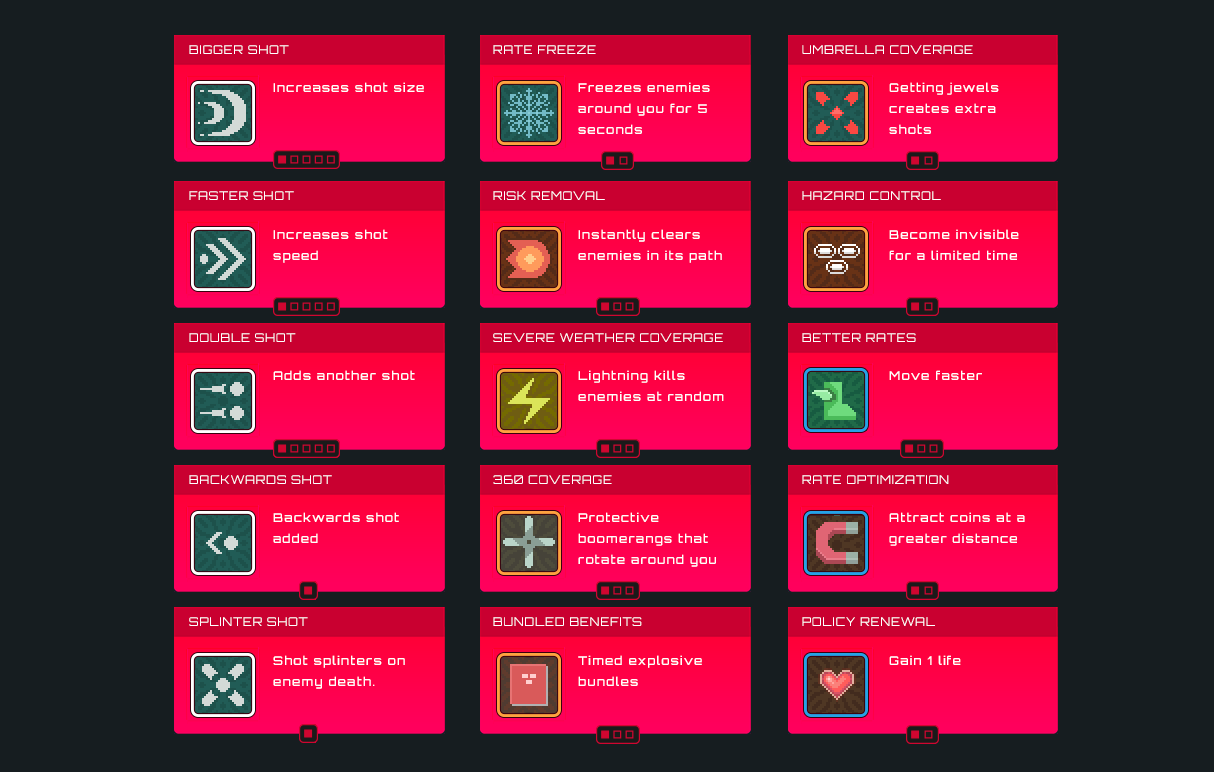
<style>
.page{position:relative;width:1214px;height:772px;background:#161d20}
.page>*{position:absolute;margin:0}
.t1{font:12px "Orbitron-Regular";letter-spacing:0.05em;color:#ffffff}
.t2{font:12px "Orbitron-Medium";letter-spacing:0.1em;color:#ffffff}
.t3{font:12px/21px "Orbitron-Medium";letter-spacing:0.1em;color:#ffffff}
</style>
<div class="page">
<p class="t1" style="left:189px;top:45px;width:100px;height:9px">BIGGER SHOT</p>
<p class="t1" style="left:493px;top:45px;width:103px;height:9px">RATE FREEZE</p>
<p class="t1" style="left:802px;top:45px;width:171px;height:9px">UMBRELLA COVERAGE</p>
<p class="t2" style="left:273px;top:82px;width:151px;height:10px">Increases shot size</p>
<p class="t3" style="left:578px;top:82px;width:132px;height:52px">Freezes enemies around you for 5 seconds</p>
<p class="t3" style="left:889px;top:82px;width:110px;height:52px">Getting jewels creates extra shots</p>
<p class="t1" style="left:189px;top:191px;width:105px;height:9px">FASTER SHOT</p>
<p class="t1" style="left:493px;top:191px;width:112px;height:9px">RISK REMOVAL</p>
<p class="t1" style="left:802px;top:191px;width:139px;height:9px">HAZARD CONTROL</p>
<p class="t3" style="left:273px;top:229px;width:115px;height:34px">Increases shot speed</p>
<p class="t3" style="left:578px;top:229px;width:144px;height:34px">Instantly clears enemies in its path</p>
<p class="t3" style="left:889px;top:229px;width:130px;height:31px">Become invisible for a limited time</p>
<p class="t1" style="left:189px;top:333px;width:107px;height:9px">DOUBLE SHOT</p>
<p class="t1" style="left:493px;top:333px;width:230px;height:9px">SEVERE WEATHER COVERAGE</p>
<p class="t1" style="left:802px;top:333px;width:114px;height:9px">BETTER RATES</p>
<p class="t2" style="left:273px;top:370px;width:142px;height:10px">Adds another shot</p>
<p class="t3" style="left:578px;top:370px;width:146px;height:31px">Lightning kills enemies at random</p>
<p class="t2" style="left:889px;top:370px;width:93px;height:10px">Move faster</p>
<p class="t1" style="left:189px;top:475px;width:143px;height:9px">BACKWARDS SHOT</p>
<p class="t1" style="left:493px;top:475px;width:119px;height:9px">360 COVERAGE</p>
<p class="t1" style="left:802px;top:475px;width:147px;height:9px">RATE OPTIMIZATION</p>
<p class="t3" style="left:273px;top:512px;width:126px;height:31px">Backwards shot added</p>
<p class="t3" style="left:578px;top:512px;width:138px;height:55px">Protective boomerangs that rotate around you</p>
<p class="t3" style="left:889px;top:512px;width:136px;height:34px">Attract coins at a greater distance</p>
<p class="t1" style="left:189px;top:617px;width:119px;height:9px">SPLINTER SHOT</p>
<p class="t1" style="left:493px;top:617px;width:149px;height:9px">BUNDLED BENEFITS</p>
<p class="t1" style="left:802px;top:617px;width:133px;height:9px">POLICY RENEWAL</p>
<p class="t3" style="left:273px;top:655px;width:132px;height:34px">Shot splinters on enemy death.</p>
<p class="t3" style="left:578px;top:655px;width:124px;height:31px">Timed explosive bundles</p>
<p class="t2" style="left:889px;top:655px;width:72px;height:10px">Gain 1 life</p>
</div>
